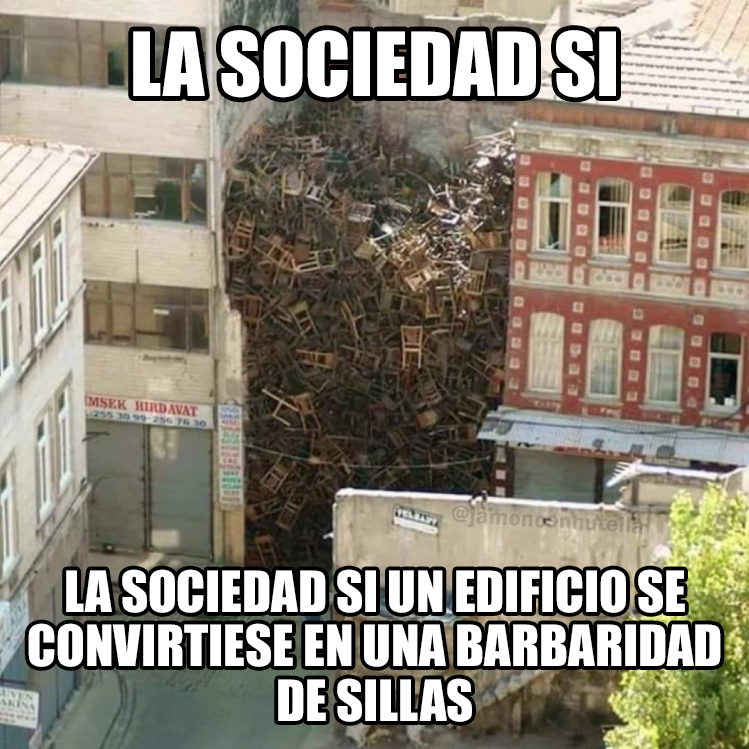
<style>
.page{position:relative;width:749px;height:749px}
.page>*{position:absolute;margin:0}
.t1{font:81.5px "Impact";color:#ffffff}
.t2{font:23.8px "FranklinGothic-Demi";color:#a29883}
.t3{font:52.4px "Impact";color:#ffffff}
</style>
<div class="page">
<p class="t1" style="left:133px;top:30px;width:483px;height:68px">LA SOCIEDAD SI</p>
<p class="t2" style="left:452px;top:505px;width:191px;height:29px;rotate:4deg">@jamonconnutella</p>
<p class="t3" style="left:28px;top:569px;width:693px;height:153px;text-align:center">LA SOCIEDAD SI UN EDIFICIO SE<br>CONVIRTIESE EN UNA BARBARIDAD<br>DE SILLAS</p>
</div>
